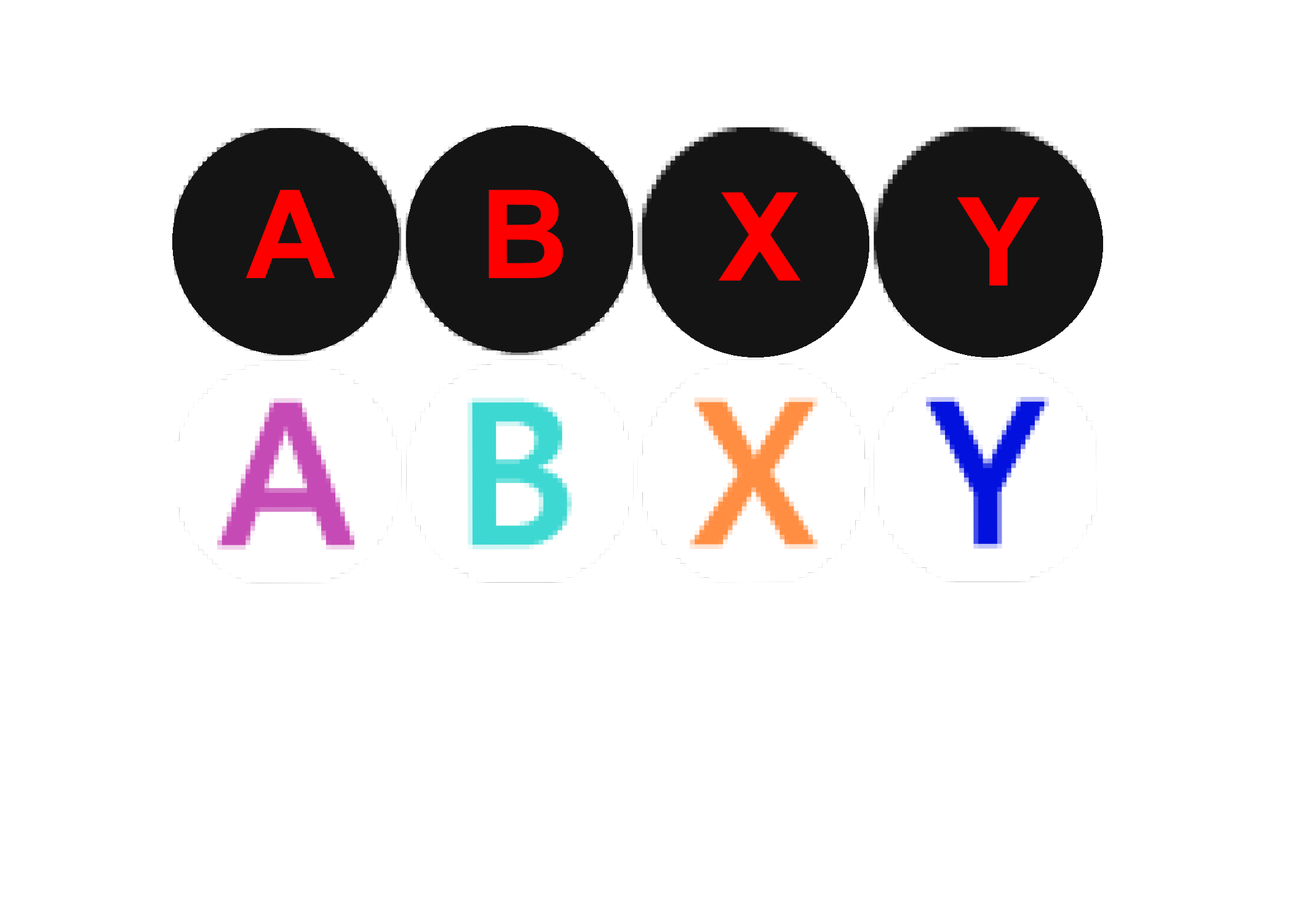
<style>
.page{position:relative;width:1292px;height:923px;background:#ffffff}
.page>*{position:absolute;margin:0}
.t1{font:123.1px "Arial-BoldMT";color:#ff0000}
</style>
<div class="page">
<p class="t1" style="left:246px;top:190px;width:89px;height:88px">A</p>
<p class="t1" style="left:489px;top:190px;width:74px;height:88px">B</p>
<p class="t1" style="left:719px;top:192px;width:82px;height:89px">X</p>
<p class="t1" style="left:957px;top:197px;width:83px;height:88px">Y</p>
</div>
